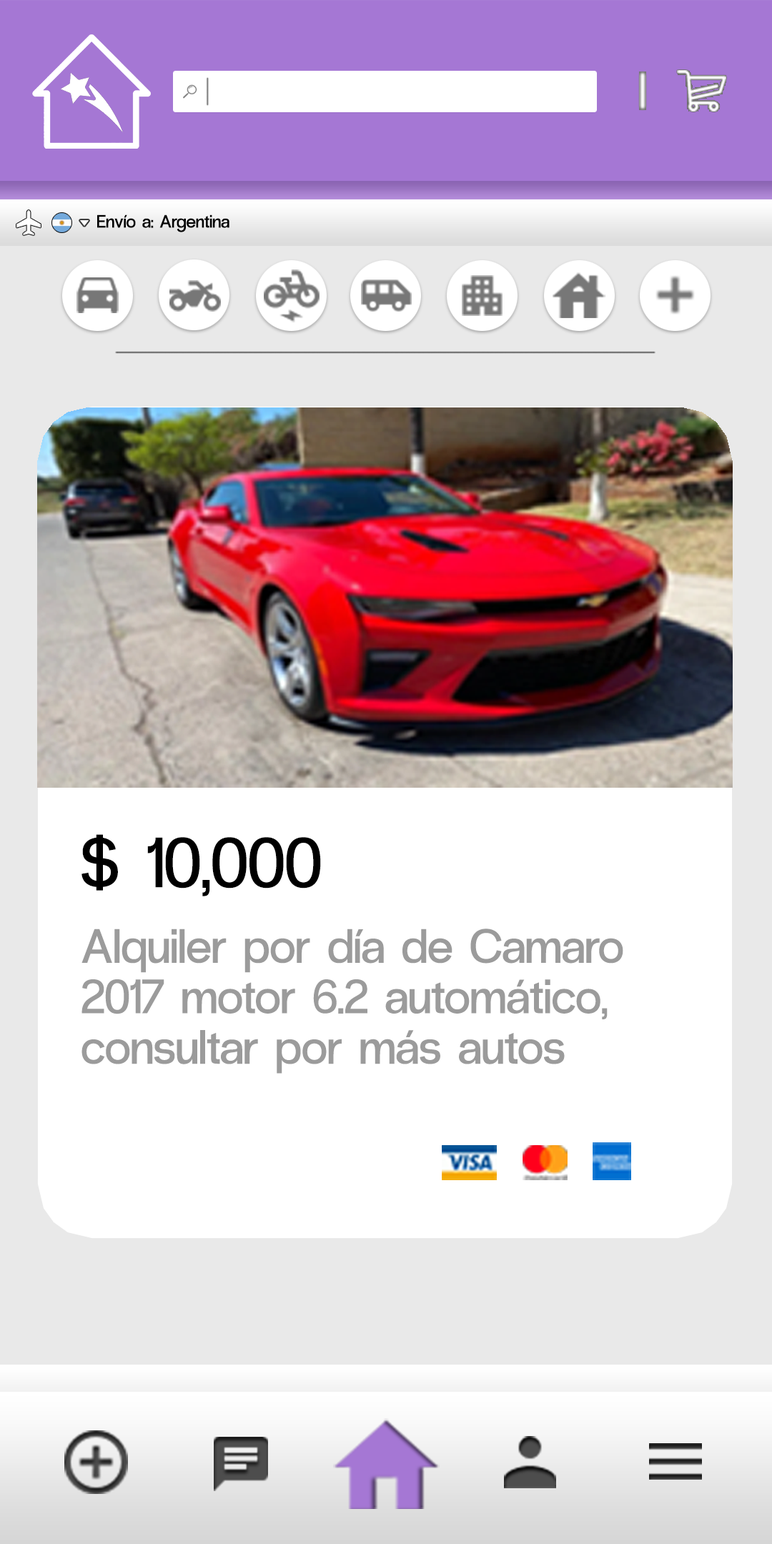
<style>
.page{position:relative;width:772px;height:1544px;background:#ffffff}
.page>*{position:absolute;margin:0}
.t1{font:17.9px "RadioGrotesk-Regular";color:#000000}
.t2{font:70.7px "RadioGrotesk-Regular";color:#000000}
.t3{font:47.9px/50.5px "RadioGrotesk-Regular";color:#9b9b9b}
</style>
<div class="page">
<p class="t1" style="left:97px;top:214px;width:133px;height:18px">Envío a: Argentina</p>
<p class="t2" style="left:82px;top:834px;width:239px;height:63px">$ 10,000</p>
<p class="t3" style="left:82px;top:929px;width:541px;height:145px">Alquiler por día de Camaro<br>2017 motor 6.2 automático,<br>consultar por más autos</p>
</div>
